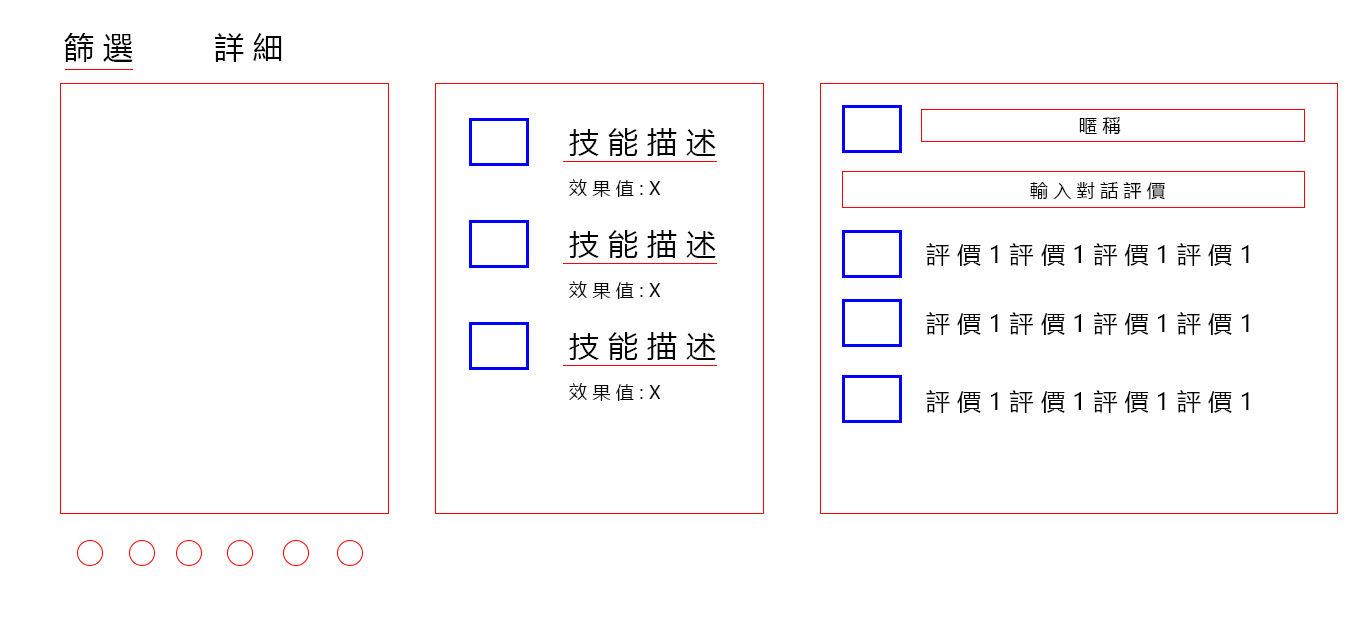
<style>
.page{position:relative;width:1365px;height:620px;background:#ffffff}
.page>*{position:absolute;margin:0}
.t1{font:30px "MicrosoftYaHei";letter-spacing:0.3em;color:#030303}
.t2{font:18px "MicrosoftYaHei";letter-spacing:0.3em;color:#030303}
.t3{font:24px "MicrosoftYaHei";letter-spacing:0.3em;color:#030303}
</style>
<div class="page">
<p class="t1" style="left:64px;top:33px;width:69px;height:29px">篩選</p>
<p class="t1" style="left:214px;top:33px;width:68px;height:29px">詳細</p>
<p class="t2" style="left:1079px;top:117px;width:42px;height:17px">暱稱</p>
<p class="t1" style="left:569px;top:128px;width:147px;height:28px">技能描述</p>
<p class="t2" style="left:569px;top:179px;width:92px;height:18px">效果值:X</p>
<p class="t2" style="left:1030px;top:182px;width:135px;height:18px">輸入對話評價</p>
<p class="t1" style="left:569px;top:230px;width:147px;height:28px">技能描述</p>
<p class="t3" style="left:926px;top:243px;width:323px;height:23px">評價1評價1評價1評價1</p>
<p class="t2" style="left:569px;top:281px;width:92px;height:18px">效果值:X</p>
<p class="t3" style="left:926px;top:312px;width:323px;height:23px">評價1評價1評價1評價1</p>
<p class="t1" style="left:569px;top:332px;width:147px;height:28px">技能描述</p>
<p class="t2" style="left:569px;top:383px;width:92px;height:18px">效果值:X</p>
<p class="t3" style="left:926px;top:390px;width:323px;height:23px">評價1評價1評價1評價1</p>
</div>
